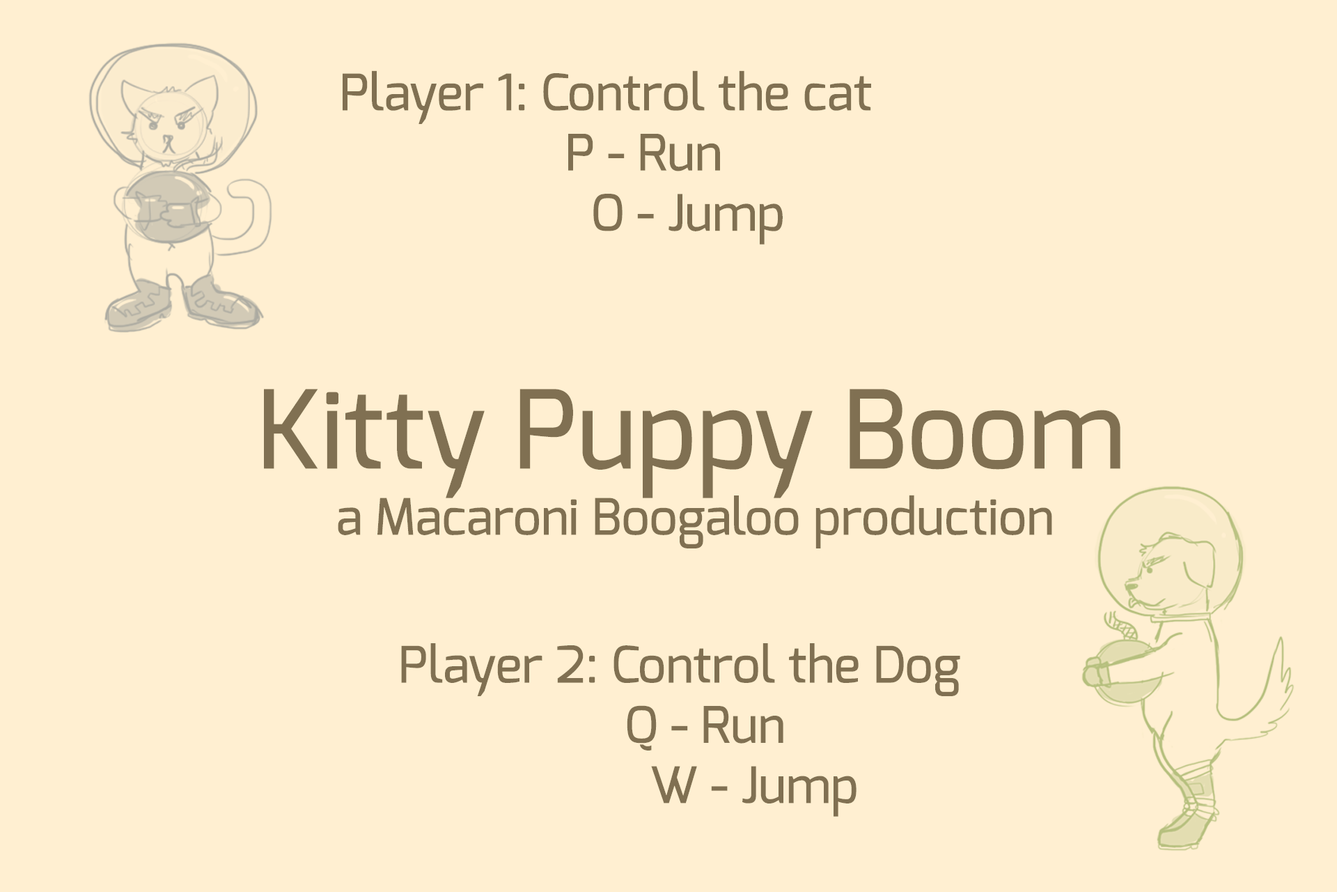
<style>
.page{position:relative;width:1337px;height:892px;background:#ffefd1}
.page>*{position:absolute;margin:0}
.t1{font:50.2px "Exo-Medium";color:#807052}
.t2{font:108.7px "Exo-Medium";color:#807052}
</style>
<div class="page">
<p class="t1" style="left:343px;top:70px;width:528px;height:174px">Player 1: Control the cat<br>                 P - Run<br>                  O - Jump</p>
<p class="t2" style="left:264px;top:389px;width:857px;height:109px">Kitty Puppy Boom</p>
<p class="t1" style="left:338px;top:495px;width:715px;height:53px">a Macaroni Boogaloo production</p>
<p class="t1" style="left:401px;top:643px;width:560px;height:173px">Player 2: Control the Dog<br>                 Q - Run<br>                  W - Jump</p>
</div>
